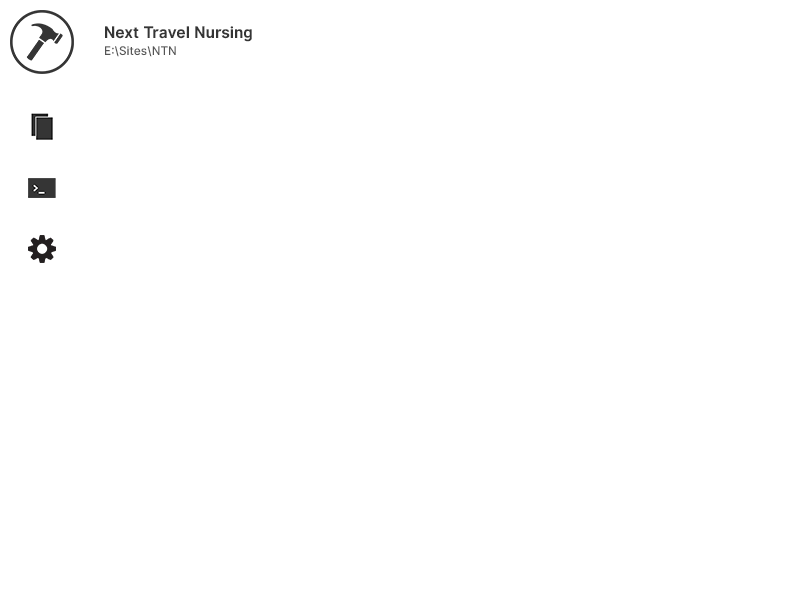
<style>
.page{position:relative;width:800px;height:600px;background:#ffffff}
.page>*{position:absolute;margin:0}
.t1{font:16px "InterUI-Bold";color:#353535}
.t2{font:12px "InterUI-Medium";color:#555555}
</style>
<div class="page">
<p class="t1" style="left:105px;top:26px;width:147px;height:16px">Next Travel Nursing</p>
<p class="t2" style="left:105px;top:46px;width:71px;height:11px">E:\Sites\NTN</p>
</div>
